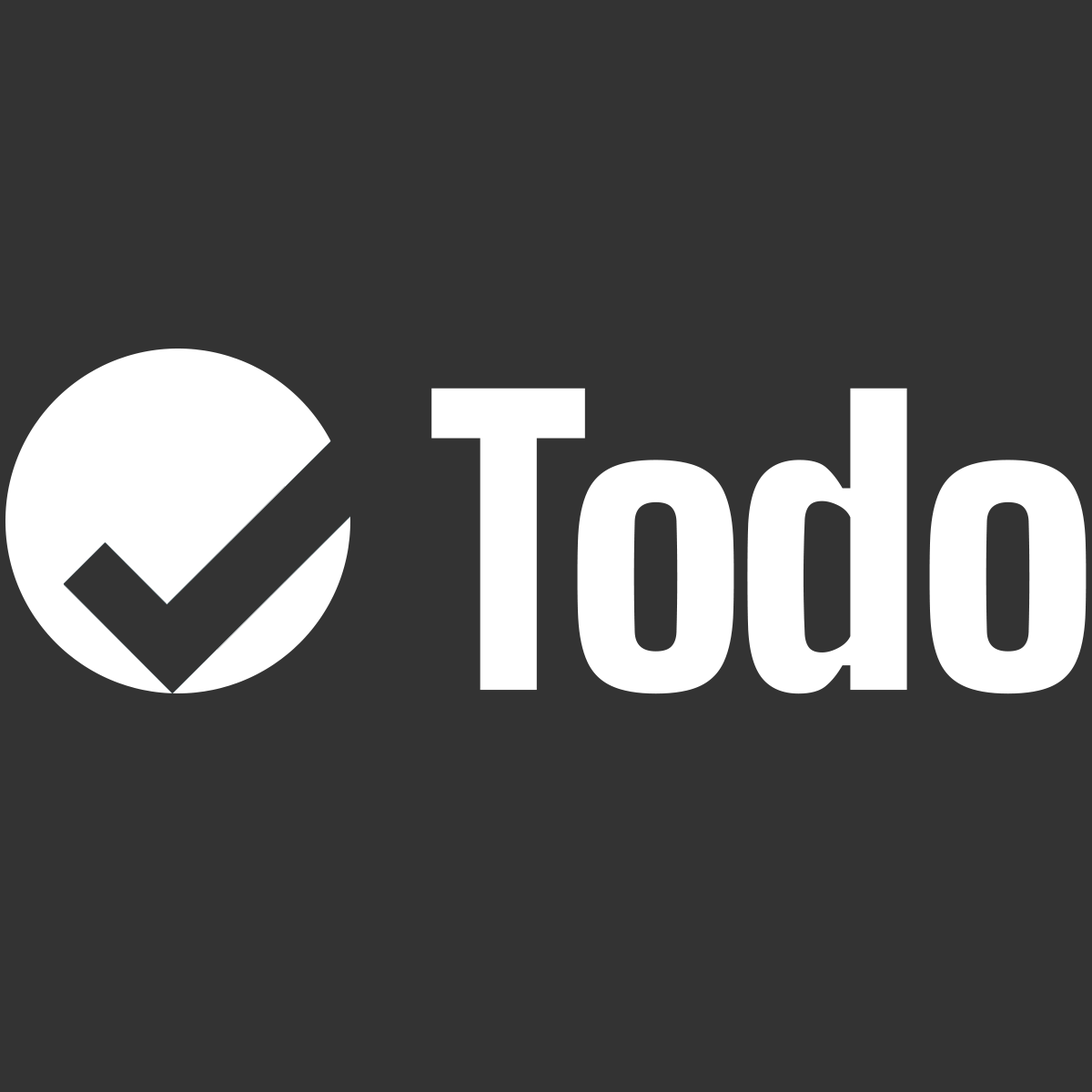
<style>
.page{position:relative;width:1092px;height:1092px;background:#333333}
.page>*{position:absolute;margin:0}
.t1{font:376.8px "BigShouldersDisplay-Black";letter-spacing:-0.02em;color:#ffffff}
</style>
<div class="page">
<p class="t1" style="left:431px;top:388px;width:656px;height:306px">Todo</p>
</div>
